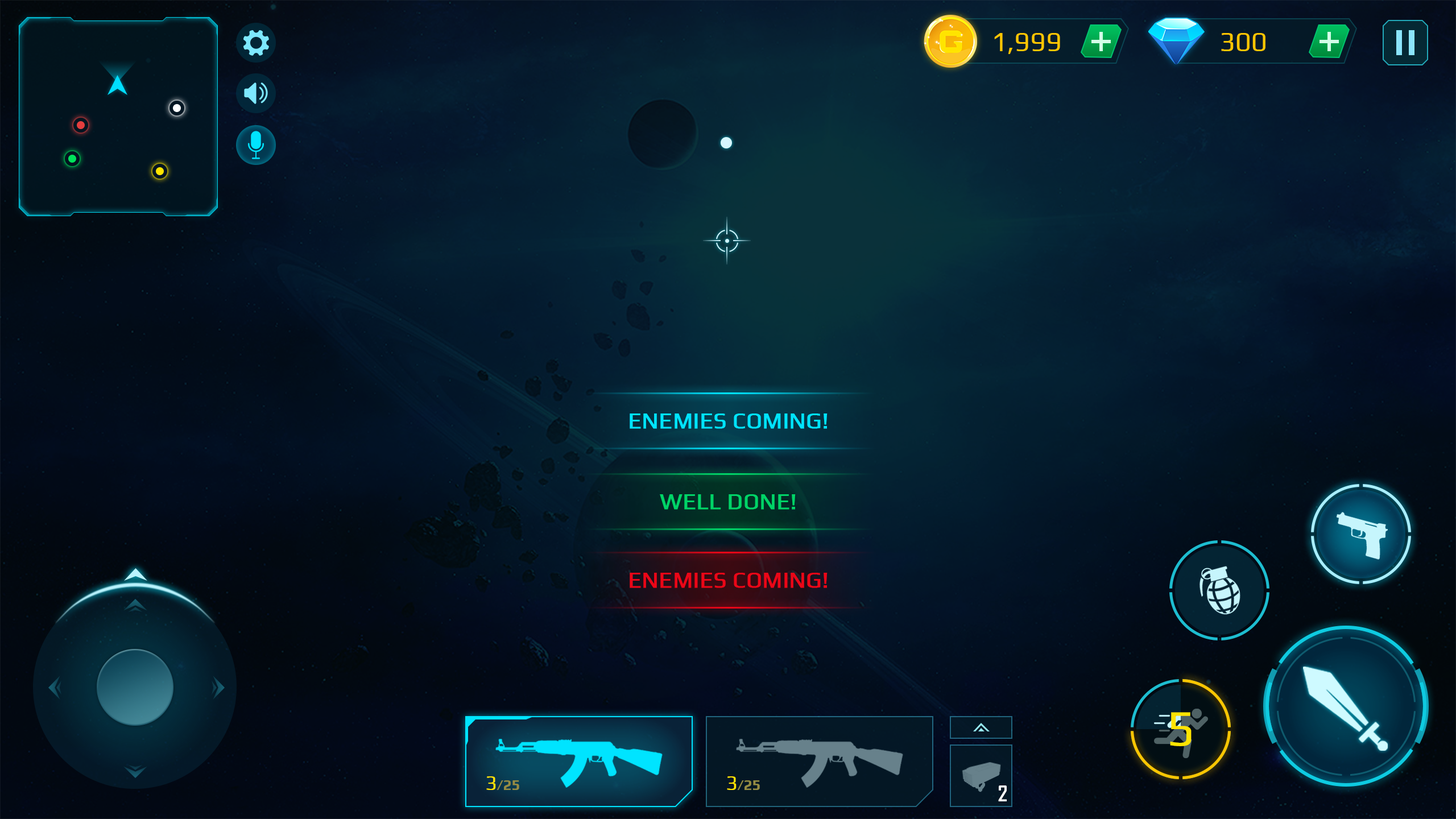
<style>
.page{position:relative;width:1456px;height:819px}
.page>*{position:absolute;margin:0}
.t1{font:27.3px "Play-Regular";color:#ffc600}
.t2{font:22.7px "Play-Regular";color:#00e4ff;text-transform:uppercase;font-weight:bold}
.t3{font:22.7px "Play-Regular";color:#00d467;text-transform:uppercase;font-weight:bold}
.t4{font:22.7px "Play-Regular";color:#eb0617;text-transform:uppercase;font-weight:bold}
.t5{font:51.2px "Play-Regular";color:#ffe400}
.t6{font:14.8px "Play-Bold";color:#958c43}
.t7{font:20.5px "Play-Regular";color:#ffe400}
.t8{font:20.5px "AgencyFB-Bold";color:#ffffff}
</style>
<div class="page">
<p class="t1" style="left:994px;top:33px;width:66px;height:21px">1,999</p>
<p class="t1" style="left:1221px;top:33px;width:44px;height:18px">300</p>
<p class="t2" style="left:630px;top:413px;width:198px;height:16px">Enemies Coming!</p>
<p class="t3" style="left:660px;top:494px;width:136px;height:16px">WELL DONE!</p>
<p class="t4" style="left:630px;top:573px;width:198px;height:15px">Enemies Coming!</p>
<p class="t5" style="left:1170px;top:712px;width:22px;height:34px">5</p>
<p class="t6" style="left:486px;top:776px;width:33px;height:14px"><span class="t7">3</span>/25</p>
<p class="t6" style="left:727px;top:776px;width:33px;height:14px"><span class="t7">3</span>/25</p>
<p class="t8" style="left:998px;top:785px;width:9px;height:16px">2</p>
</div>
